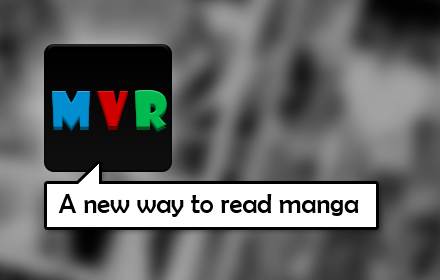
<style>
.page{position:relative;width:440px;height:280px}
.page>*{position:absolute;margin:0}
.t1{font:26.7px "BerlinSansFB-Reg";color:#000000}
</style>
<div class="page">
<p class="t1" style="left:58px;top:193px;width:301px;height:24px">A new way to read manga</p>
</div>
